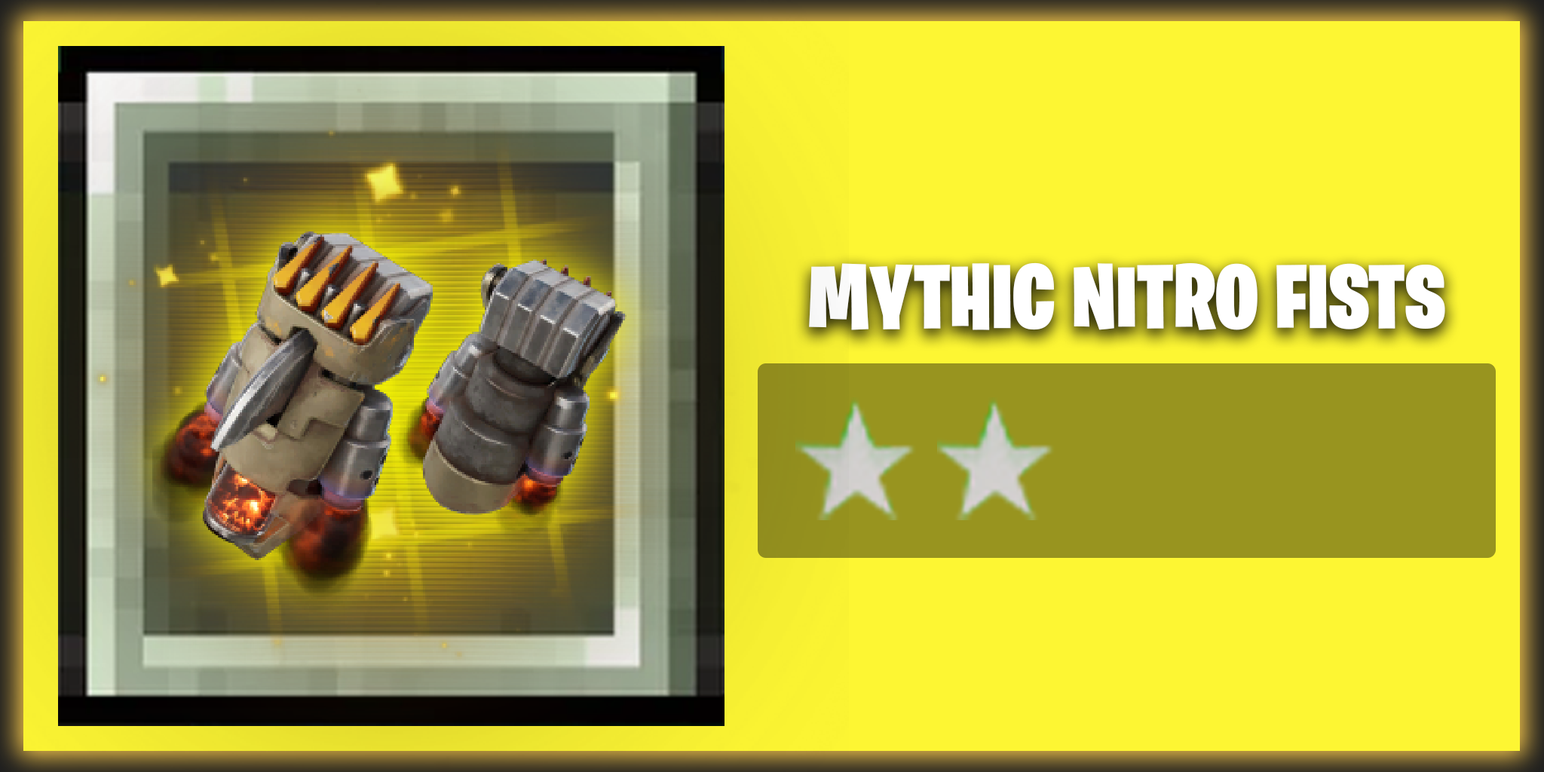
<style>
.page{position:relative;width:1544px;height:772px;background:#fdf633}
.page>*{position:absolute;margin:0}
.t1{font:90.5px "BurbankBigCondensed-Black";color:#ffffff}
</style>
<div class="page">
<p class="t1" style="left:809px;top:262px;width:637px;height:68px">MYTHIC NITRO FISTS</p>
</div>
